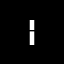
<style>
.page{position:relative;width:64px;height:64px;background:#000000}
.page>*{position:absolute;margin:0}
.t1{font:30px "SCIFIBOX";color:#ffffff}
</style>
<div class="page">
<p class="t1" style="left:29px;top:20px;width:6px;height:25px">1</p>
</div>
